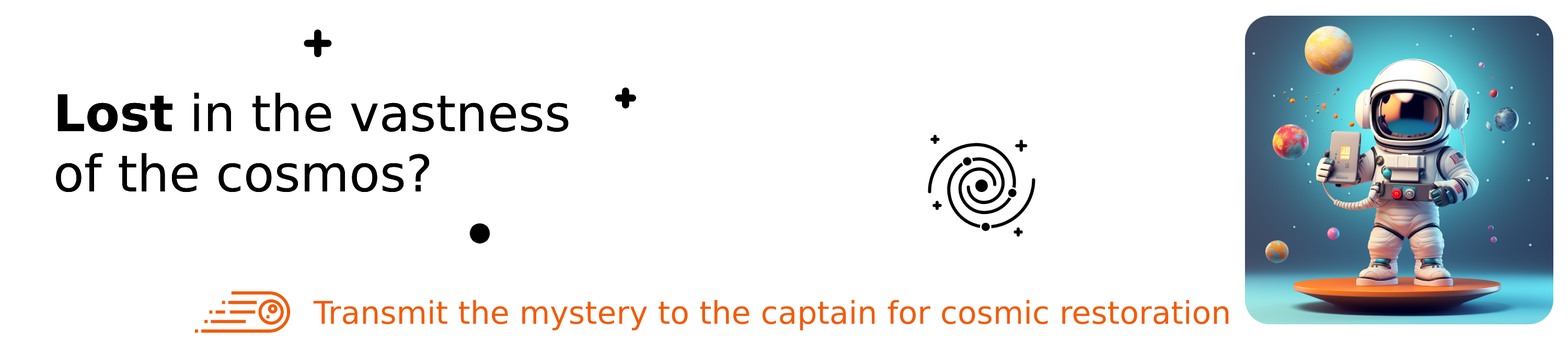
<style>
.page{position:relative;width:1568px;height:340px;background:#ffffff}
.page>*{position:absolute;margin:0}
.t1{font:50.2px "DejaVuSans";color:#000000}
.t2{font:50.2px "DejaVuSans-Bold";color:#000000}
.t3{font:31.4px "DejaVuSans";color:#f15c0b}
</style>
<div class="page">
<p class="t1" style="left:56px;top:93px;width:513px;height:99px"><span class="t2">Lost</span> in the vastness<br>of the cosmos?</p>
<p class="t3" style="left:313px;top:299px;width:916px;height:31px">Transmit the mystery to the captain for cosmic restoration</p>
</div>
